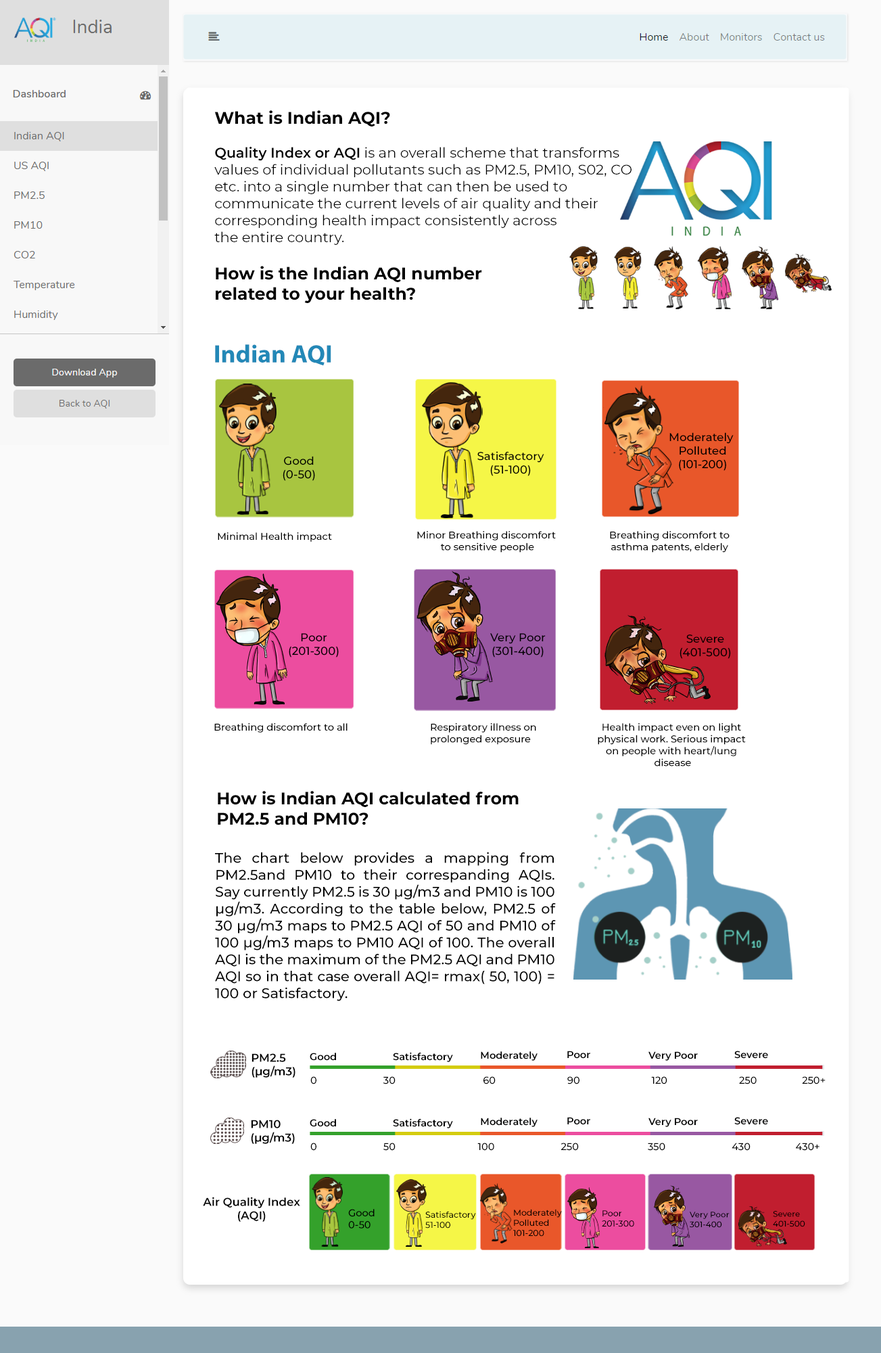
<style>
.page{position:relative;width:881px;height:1353px;background:#ffffff}
.page>*{position:absolute;margin:0}
.t1{font:14.1px "Montserrat-Regular";color:#000000}
.t2{font:16.9px "Montserrat-Bold";color:#000000}
.t3{font:14.1px "Montserrat-SemiBold";color:#000000}
.t4{font:25.4px "MyriadPro-Bold";color:#2388b7}
.t5{font:11.3px "Montserrat-Medium";color:#000000}
.t6{font:9.9px "Montserrat-Medium";color:#000000}
.t7{font:14.1px "Montserrat-Medium";color:#000000}
.t8{font:11.3px "Montserrat-SemiBold";color:#000000}
.t9{font:9.9px "Montserrat-SemiBold";color:#000000}
.t10{font:8.5px "Montserrat-Medium";color:#000000}
.t11{font:8.1px "Montserrat-Medium";color:#000000}
</style>
<div class="page">
<p class="t1" style="left:214px;top:110px;width:418px;height:193px"><span class="t2">What is Indian AQI?<br><br></span><span class="t3">Quality Index or AQI</span> is an overall scheme that transforms <br>values of individual pollutants such as PM2.5, PM10, S02, CO<br>etc. into a single number that can then be used to <br>communicate the current levels of air quality and their <br>corresponding health impact consistently across <br>the entire country.<br><br><span class="t2">How is the Indian AQI number <br>related to your health?</span></p>
<p class="t4" style="left:215px;top:344px;width:116px;height:22px">Indian AQI</p>
<p class="t5" style="left:670px;top:432px;width:64px;height:39px;text-align:center">Moderately <br>Polluted<br>(101-200)</p>
<p class="t5" style="left:283px;top:456px;width:32px;height:25px;text-align:center">Good<br>(0-50)</p>
<p class="t5" style="left:478px;top:451px;width:67px;height:25px;text-align:center">Satisfactory<br>(51-100)</p>
<p class="t6" style="left:218px;top:532px;width:114px;height:10px">Minimal Health impact</p>
<p class="t6" style="left:417px;top:531px;width:139px;height:22px;text-align:center">Minor Breathing discomfort <br>to sensitive people</p>
<p class="t6" style="left:610px;top:531px;width:120px;height:22px;text-align:center">Breathing discomfort to <br>asthma patents, elderly</p>
<p class="t5" style="left:289px;top:633px;width:50px;height:25px;text-align:center">Poor<br>(201-300)</p>
<p class="t5" style="left:490px;top:633px;width:56px;height:25px;text-align:center">Very Poor<br>(301-400)</p>
<p class="t5" style="left:680px;top:635px;width:51px;height:24px;text-align:center">Severe<br>(401-500)</p>
<p class="t6" style="left:214px;top:723px;width:134px;height:10px">Breathing discomfort to all</p>
<p class="t6" style="left:431px;top:723px;width:105px;height:22px">Respiratory illness on <br>prolonged exposure</p>
<p class="t6" style="left:598px;top:723px;width:148px;height:43px;text-align:center">Health impact even on light <br>physical work. Serious impact <br>on people with heart/lung <br>disease</p>
<p class="t2" style="left:218px;top:791px;width:301px;height:34px">How is Indian AQI calculated from <br>PM2.5 and PM10?</p>
<p class="t7" style="left:215px;top:852px;width:341px;height:149px;text-align:justify">The chart below provides a mapping from PM2.5and PM10 to their correspanding AQIs. Say currently PM2.5 is 30 µg/m3 and PM10 is 100 µg/m3. According to the table below, PM2.5 of 30 µg/m3 maps to PM2.5 AQI of 50 and PM10 of 100 µg/m3 maps to PM10 AQI of 100. The overall AQI is the maximum of the PM2.5 AQI and PM10 AQI so in that case overall AQI= rmax( 50, 100) = 100 or Satisfactory.</p>
<p class="t8" style="left:252px;top:1053px;width:44px;height:25px">PM2.5<br>(µg/m3)</p>
<p class="t9" style="left:310px;top:1053px;width:26px;height:8px">Good</p>
<p class="t9" style="left:393px;top:1052px;width:60px;height:10px">Satisfactory</p>
<p class="t9" style="left:481px;top:1051px;width:57px;height:10px">Moderately</p>
<p class="t9" style="left:568px;top:1051px;width:23px;height:8px">Poor</p>
<p class="t9" style="left:649px;top:1051px;width:49px;height:10px">Very Poor</p>
<p class="t9" style="left:735px;top:1051px;width:33px;height:8px">Severe</p>
<p class="t6" style="left:310px;top:1076px;width:516px;height:8px">0                         30                                 60                           90                           120                           250                 250+</p>
<p class="t8" style="left:251px;top:1120px;width:44px;height:24px">PM10<br>(µg/m3)</p>
<p class="t9" style="left:310px;top:1119px;width:26px;height:8px">Good</p>
<p class="t9" style="left:393px;top:1118px;width:60px;height:10px">Satisfactory</p>
<p class="t9" style="left:481px;top:1117px;width:57px;height:10px">Moderately</p>
<p class="t9" style="left:568px;top:1117px;width:23px;height:8px">Poor</p>
<p class="t9" style="left:649px;top:1117px;width:49px;height:10px">Very Poor</p>
<p class="t9" style="left:735px;top:1117px;width:33px;height:8px">Severe</p>
<p class="t6" style="left:310px;top:1143px;width:510px;height:8px">0                         50                               100                         250                          350                         430                 430+</p>
<p class="t8" style="left:203px;top:1197px;width:97px;height:25px;text-align:center">Air Quality Index<br>(AQI)</p>
<p class="t6" style="left:348px;top:1209px;width:27px;height:19px">Good<br>0-50</p>
<p class="t10" style="left:425px;top:1211px;width:51px;height:17px">Satisfactory<br>51-100</p>
<p class="t10" style="left:513px;top:1209px;width:49px;height:28px">Moderately<br>Polluted<br>101-200</p>
<p class="t10" style="left:602px;top:1210px;width:33px;height:17px">Poor<br>201-300</p>
<p class="t11" style="left:690px;top:1212px;width:40px;height:16px">Very Poor<br>301-400</p>
<p class="t11" style="left:773px;top:1211px;width:33px;height:16px">Severe<br>401-500</p>
</div>
